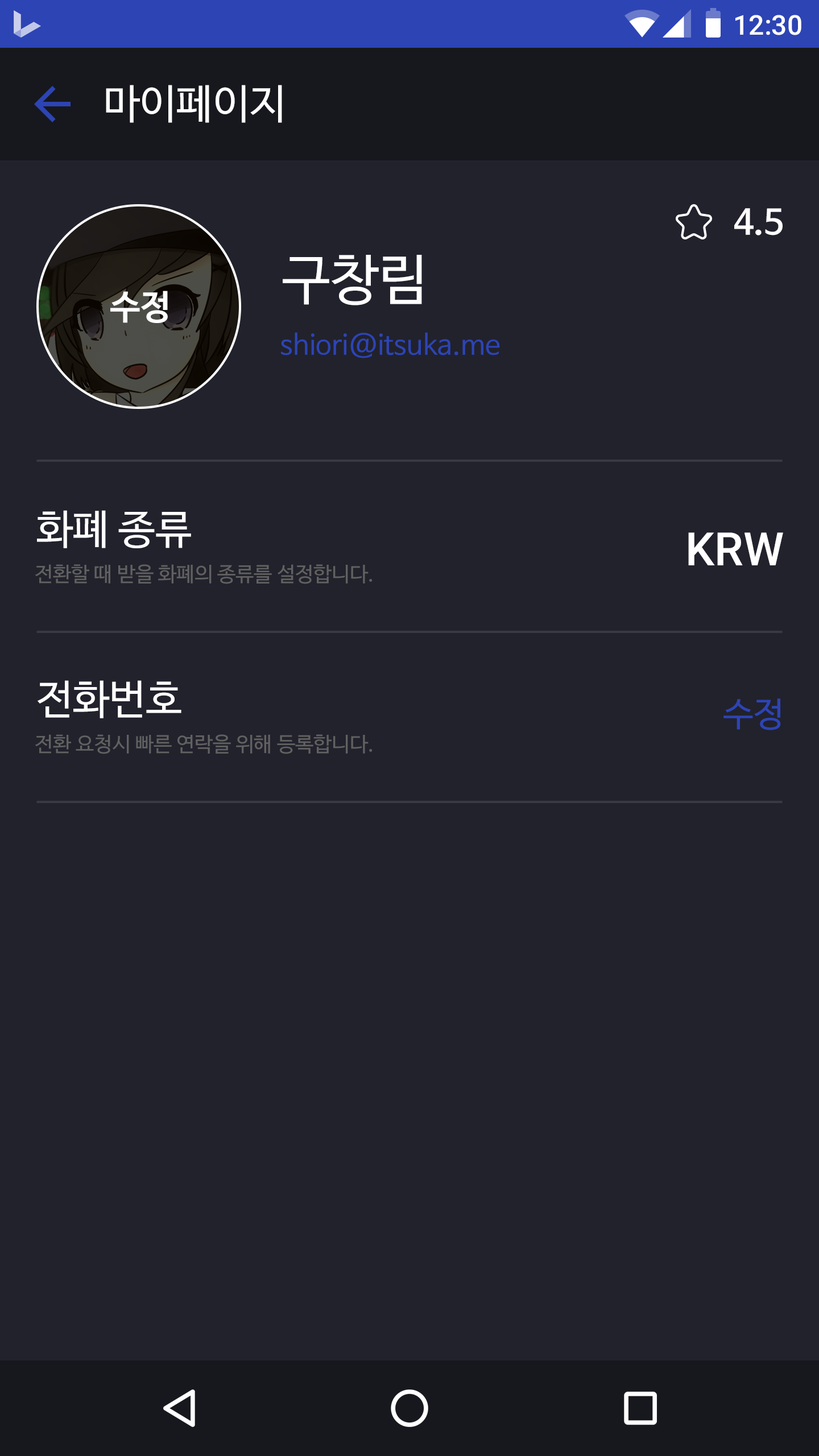
<style>
.page{position:relative;width:819px;height:1456px;background:#21222c}
.page>*{position:absolute;margin:0}
.t1{font:27.3px "Roboto-Medium";color:#ffffff}
.t2{font:40.9px "NanumBarunGothic";color:#ffffff}
.t3{font:34.1px "NanumBarunGothicBold";color:#ffffff}
.t4{font:54.6px "NanumBarunGothic";color:#ffffff}
.t5{font:27.3px "NanumBarunGothic";color:#2d44b5}
.t6{font:46.1px "Roboto-Medium";color:#ffffff}
.t7{font:20.5px "NanumBarunGothic";color:#616161}
.t8{font:34.1px "NanumBarunGothic";color:#2d44b5}
</style>
<div class="page">
<p class="t1" style="left:735px;top:15px;width:66px;height:20px">12:30</p>
<p class="t2" style="left:106px;top:85px;width:176px;height:38px">마이페이지</p>
<p class="t3" style="left:734px;top:208px;width:49px;height:27px">4.5</p>
<p class="t4" style="left:283px;top:255px;width:139px;height:50px">구창림</p>
<p class="t3" style="left:110px;top:291px;width:58px;height:32px">수정</p>
<p class="t5" style="left:281px;top:332px;width:219px;height:26px">shiori@itsuka.me</p>
<p class="t2" style="left:37px;top:510px;width:154px;height:38px">화폐 종류</p>
<p class="t6" style="left:688px;top:532px;width:95px;height:33px">KRW</p>
<p class="t7" style="left:35px;top:564px;width:338px;height:20px">전환할 때 받을 화폐의 종류를 설정합니다.</p>
<p class="t2" style="left:38px;top:680px;width:143px;height:38px">전화번호</p>
<p class="t8" style="left:723px;top:698px;width:58px;height:32px">수정</p>
<p class="t7" style="left:35px;top:734px;width:338px;height:20px">전환 요청시 빠른 연락을 위해 등록합니다.</p>
</div>
